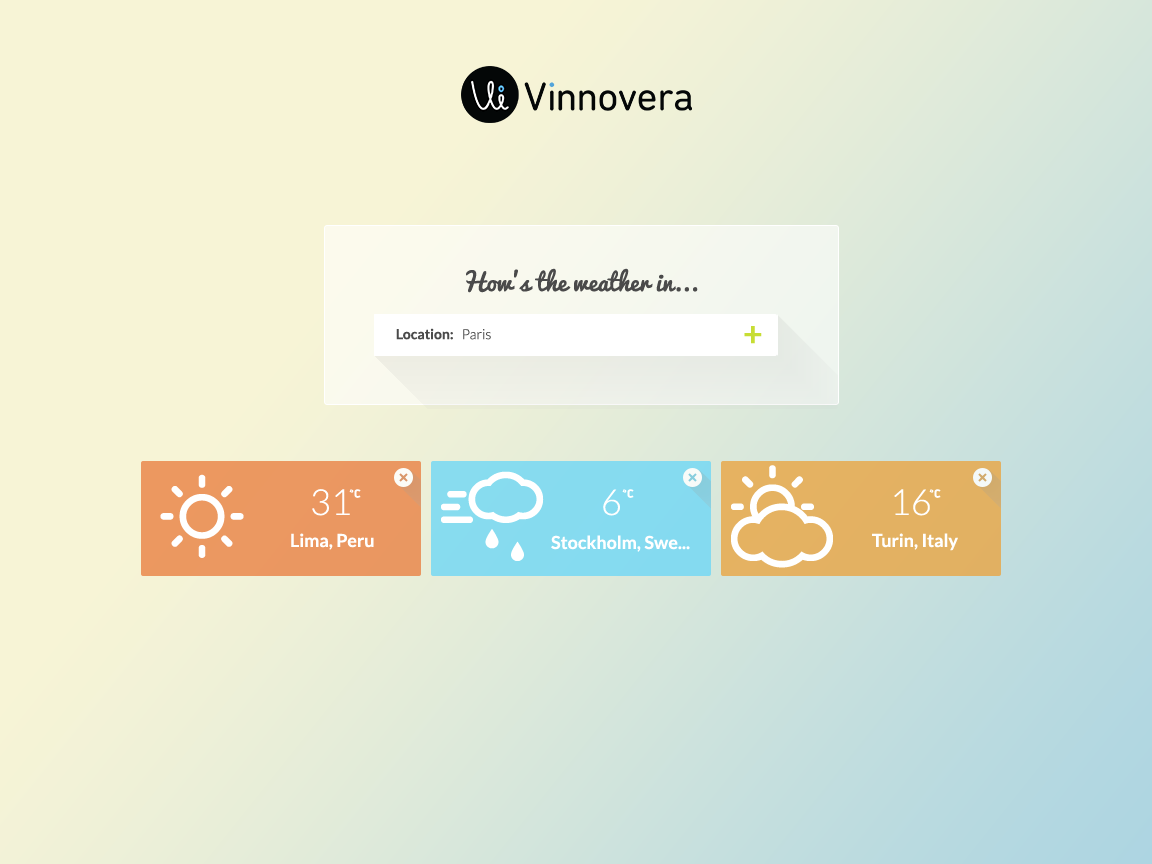
<style>
.page{position:relative;width:1152px;height:864px;background:#f7f4d6}
.page>*{position:absolute;margin:0}
.t1{font:24px "Pacifico-Regular";color:#4a4a4a}
.t2{font:14px "Lato-Bold";color:#4a4a4a}
.t3{font:14px "Lato-Light";color:#4a4a4a}
.t4{font:34px "Lato-Bold";color:#c7dd34}
.t5{font:102px "Meteocons";color:#ffffff}
.t6{font:36px "Lato-Light";color:#ffffff}
.t7{font:24px "Meteocons";color:#ffffff}
.t8{font:18px "Lato-Bold";color:#ffffff}
</style>
<div class="page">
<p class="t1" style="left:466px;top:268px;width:232px;height:25px">How’s the weather in...</p>
<p class="t2" style="left:396px;top:328px;width:95px;height:12px">Location:   <span class="t3">Paris</span></p>
<p class="t4" style="left:744px;top:326px;width:18px;height:18px">+</p>
<p class="t5" style="left:441px;top:471px;width:103px;height:90px">T</p>
<p class="t5" style="left:731px;top:465px;width:102px;height:103px">H</p>
<p class="t5" style="left:160px;top:474px;width:84px;height:84px">B</p>
<p class="t6" style="left:312px;top:489px;width:38px;height:27px">31</p>
<p class="t7" style="left:349px;top:489px;width:12px;height:9px">*</p>
<p class="t6" style="left:603px;top:489px;width:17px;height:27px">6</p>
<p class="t7" style="left:622px;top:489px;width:12px;height:9px">*</p>
<p class="t6" style="left:894px;top:489px;width:36px;height:27px">16</p>
<p class="t7" style="left:929px;top:489px;width:12px;height:9px">*</p>
<p class="t8" style="left:291px;top:533px;width:83px;height:17px">Lima, Peru</p>
<p class="t8" style="left:872px;top:533px;width:86px;height:18px">Turin, Italy</p>
<p class="t8" style="left:551px;top:535px;width:139px;height:17px">Stockholm, Swe...</p>
</div>
